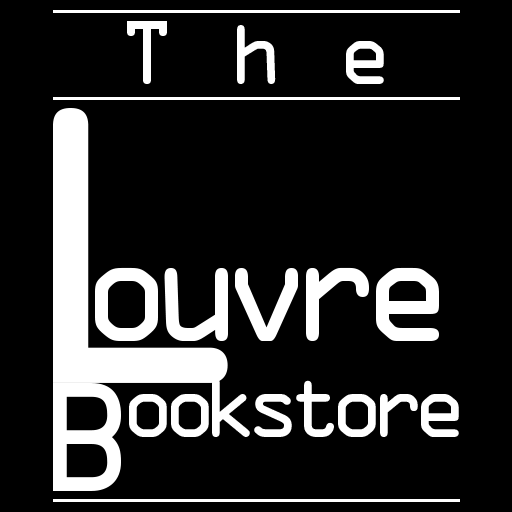
<style>
.page{position:relative;width:512px;height:512px;background:#000000}
.page>*{position:absolute;margin:0}
.t1{font:80.4px "OCRAStd";letter-spacing:0.64em;color:#ffffff}
.t2{font:353.7px "OCRAStd";color:#ffffff}
.t3{font:135.1px "OCRAStd";letter-spacing:-0.2em;color:#ffffff}
.t4{font:138.3px "OCRAStd";letter-spacing:-0.2em;color:#ffffff}
.t5{font:80.4px "OCRAStd";letter-spacing:-0.2em;color:#ffffff}
</style>
<div class="page">
<p class="t1" style="left:127px;top:21px;width:257px;height:63px">The</p>
<p class="t2" style="left:53px;top:108px;width:175px;height:275px">L</p>
<p class="t3" style="left:95px;top:267px;width:344px;height:74px">ouvre</p>
<p class="t4" style="left:53px;top:383px;width:68px;height:108px">B</p>
<p class="t5" style="left:129px;top:378px;width:330px;height:59px">ookstore</p>
</div>
